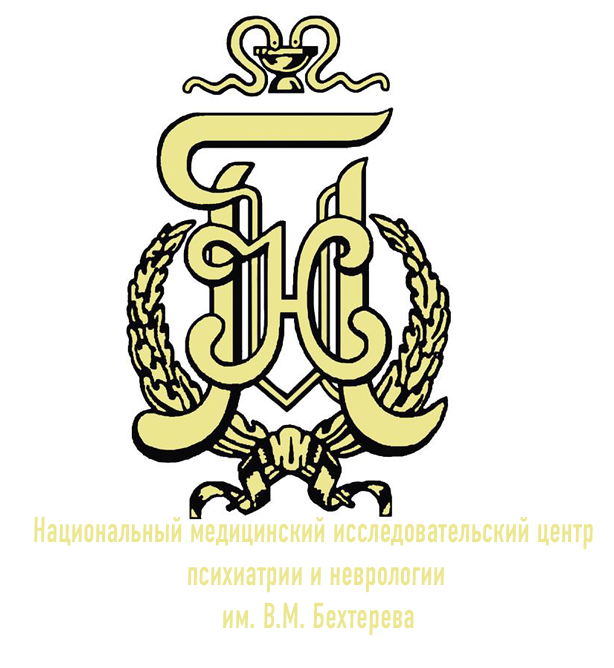
<style>
.page{position:relative;width:614px;height:668px;background:#ffffff}
.page>*{position:absolute;margin:0}
.t1{font:36px "DINCondensedC";color:#ece78f;scale:0.81 1}
</style>
<div class="page">
<p class="t1" style="left:34px;top:516px;width:559px;height:120px;text-align:center">Национальный медицинский исследовательский центр <br>психиатрии и неврологии<br> им. В.М. Бехтерева</p>
</div>
